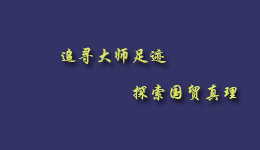
<style>
.page{position:relative;width:260px;height:150px;background:#333366}
.page>*{position:absolute;margin:0}
.t1{font:18px "STXingkai";color:#d9e462}
</style>
<div class="page">
<p class="t1" style="left:61px;top:47px;width:105px;height:17px">追寻大师足迹</p>
<p class="t1" style="left:132px;top:84px;width:105px;height:17px">探索国贸真理</p>
</div>
